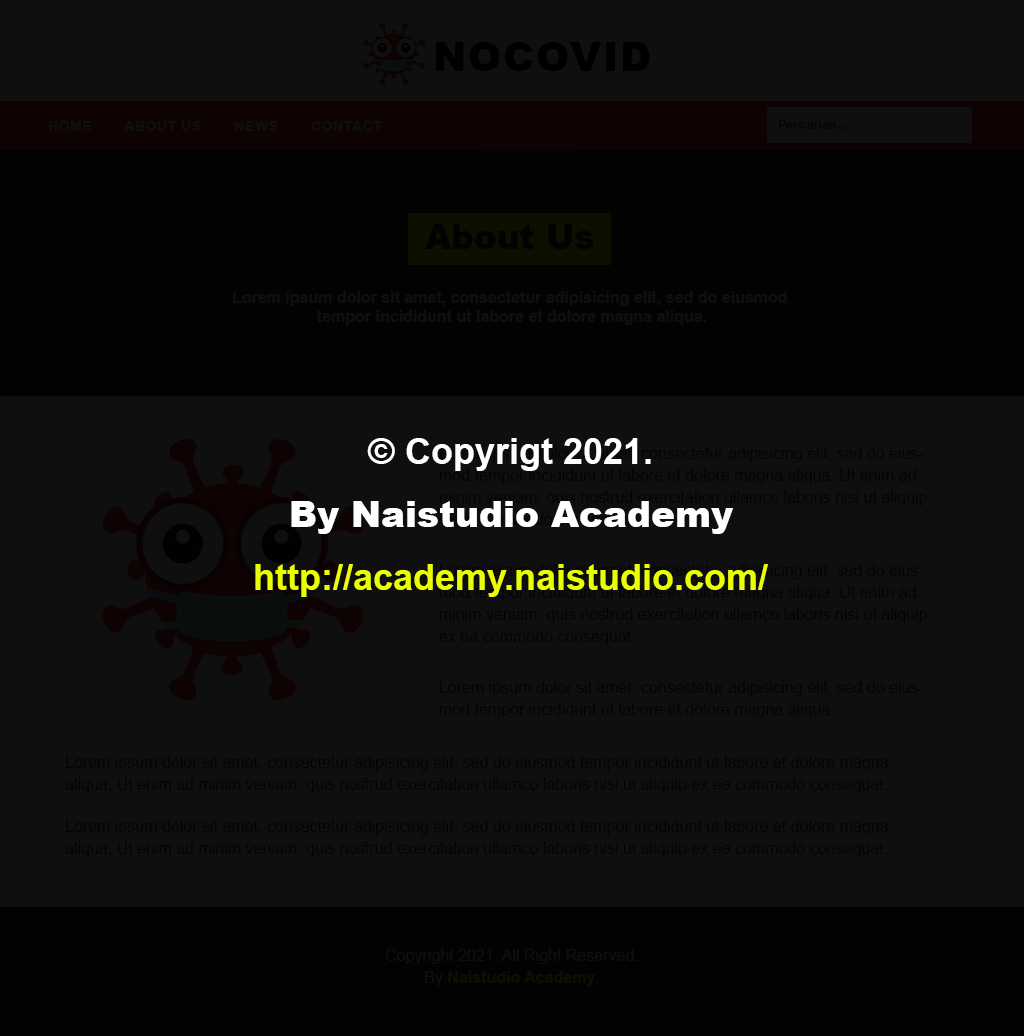
<style>
.page{position:relative;width:1024px;height:1036px;background:#0f0f0f}
.page>*{position:absolute;margin:0}
.t1{font:40px "Arial-Black";letter-spacing:0.01em;color:#000000;text-transform:uppercase}
.t2{font:14px "Arial-BoldMT";letter-spacing:0.01em;color:#0f0f0f;text-transform:uppercase}
.t3{font:12px "Arial-BoldMT";letter-spacing:0.01em;color:#050505}
.t4{font:34px "Arial-Black";color:#020202}
.t5{font:16px/19px "Arial-BoldMT";color:#0f0f0f}
.t6{font:36px/63px "Arial-BoldMT";color:#eaff00}
.t7{font:36px/63px "Arial-BoldMT";color:#ffffff}
.t8{font:36px/63px "Arial-Black";color:#ffffff}
.t9{font:16px/22px "ArialMT";color:#040404}
.t10{font:16px/22px "ArialMT";color:#0e0f00}
.t11{font:16px/22px "Arial-BoldMT";color:#0e0f00}
</style>
<div class="page">
<p class="t1" style="left:436px;top:42px;width:214px;height:29px">nocovid</p>
<p class="t2" style="left:49px;top:121px;width:333px;height:10px">HOME        About Us        News        CONTACT</p>
<p class="t3" style="left:778px;top:120px;width:72px;height:9px">Pencarian....</p>
<p class="t4" style="left:425px;top:224px;width:169px;height:25px">About Us</p>
<p class="t5" style="left:233px;top:291px;width:554px;height:34px;text-align:center">Lorem ipsum dolor sit amet, consectetur adipisicing elit, sed do eiusmod <br>tempor incididunt ut labore et dolore magna aliqua.</p>
<p class="t6" style="left:255px;top:438px;width:513px;height:159px;text-align:center"><span class="t7">© Copyrigt 2021.<br></span><span class="t8">By Naistudio Academy<br></span>http://academy.naistudio.com/</p>
<p class="t9" style="left:439px;top:564px;width:489px;height:81px">Lorem ipsum dolor sit amet, consectetur adipisicing elit, sed do eiusmod tempor incididunt ut labore et dolore magna aliqua. Ut enim ad minim veniam, quis nostrud exercitation ullamco laboris nisi ut aliquip ex ea commodo consequat.</p>
<p class="t9" style="left:439px;top:681px;width:485px;height:37px">Lorem ipsum dolor sit amet, consectetur adipisicing elit, sed do eiusmod tempor incididunt ut labore et dolore magna aliqua.</p>
<p class="t9" style="left:65px;top:756px;width:823px;height:37px">Lorem ipsum dolor sit amet, consectetur adipisicing elit, sed do eiusmod tempor incididunt ut labore et dolore magna aliqua. Ut enim ad minim veniam, quis nostrud exercitation ullamco laboris nisi ut aliquip ex ea commodo consequat.</p>
<p class="t9" style="left:65px;top:820px;width:823px;height:37px">Lorem ipsum dolor sit amet, consectetur adipisicing elit, sed do eiusmod tempor incididunt ut labore et dolore magna aliqua. Ut enim ad minim veniam, quis nostrud exercitation ullamco laboris nisi ut aliquip ex ea commodo consequat.</p>
<p class="t10" style="left:386px;top:949px;width:252px;height:37px;text-align:center">Copyright 2021. All Right Reserved.<br>By <span class="t11">Naistudio Academy</span>.</p>
</div>
